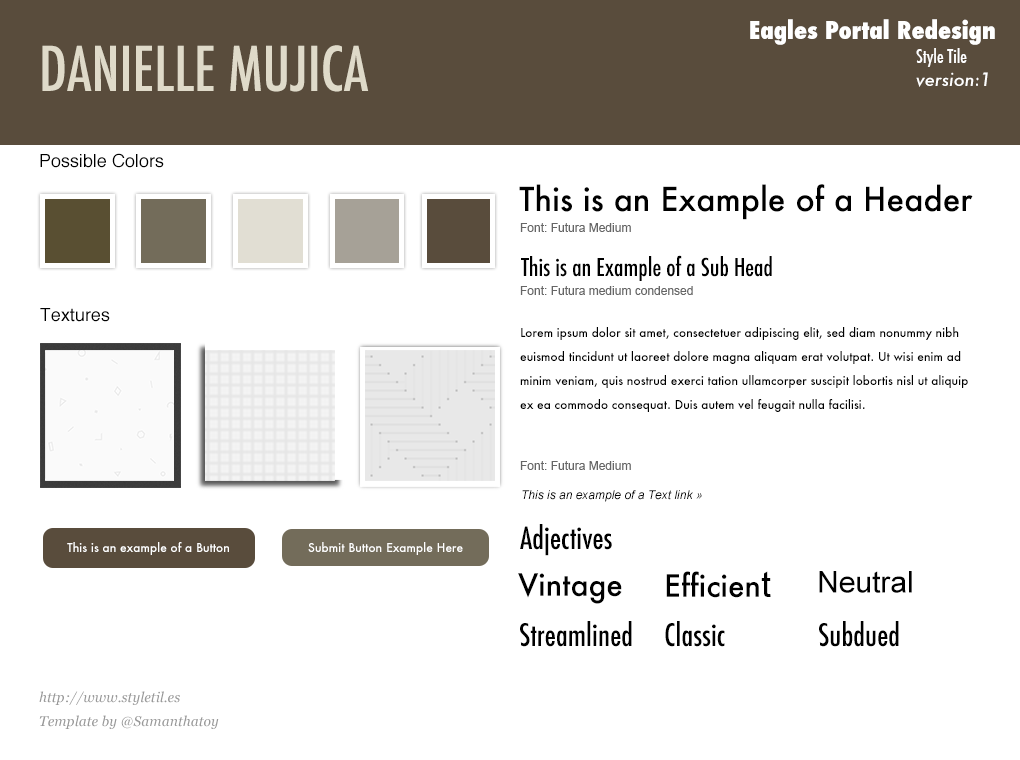
<style>
.page{position:relative;width:1020px;height:760px;background:#ffffff}
.page>*{position:absolute;margin:0}
.t1{font:24px "Futura-CondensedExtraBold";color:#ffffff}
.t2{font:60px "Futura-CondensedMedium";color:#dfdac9}
.t3{font:18px "Futura-CondensedMedium";color:#ffffff}
.t4{font:18px "Futura-MediumItalic";color:#ffffff}
.t5{font:18px "Helvetica";color:#000000}
.t6{font:32px "Futura-Medium";color:#000000}
.t7{font:12px "ArialMT";color:#666666}
.t8{font:24px "Futura-CondensedMedium";color:#000000}
.t9{font:12px/24px "Futura-Medium";color:#000000}
.t10{font:12px "Arial-ItalicMT";color:#000000}
.t11{font:30px "Futura-CondensedMedium";color:#000000}
.t12{font:12px "Futura-Medium";color:#ffffff}
.t13{font:30px "Futura-Medium";color:#000000}
.t14{font:36px "ArialMT";color:#000000}
.t15{font:30px "ArialMT";color:#000000}
.t16{font:14px/24px "Georgia-Italic";color:#999999}
</style>
<div class="page">
<p class="t1" style="left:750px;top:19px;width:245px;height:26px">Eagles Portal Redesign</p>
<p class="t2" style="left:42px;top:45px;width:327px;height:47px">DANIELLE MUJICA</p>
<p class="t3" style="left:916px;top:48px;width:51px;height:19px">Style Tile</p>
<p class="t4" style="left:916px;top:72px;width:72px;height:15px">version:1</p>
<p class="t5" style="left:40px;top:153px;width:124px;height:15px">Possible Colors</p>
<p class="t6" style="left:519px;top:184px;width:454px;height:36px">This is an Example of a Header</p>
<p class="t7" style="left:520px;top:223px;width:111px;height:9px">Font: Futura Medium</p>
<p class="t8" style="left:521px;top:255px;width:251px;height:26px">This is an Example of a Sub Head</p>
<p class="t7" style="left:520px;top:286px;width:173px;height:9px">Font: Futura medium condensed</p>
<p class="t5" style="left:40px;top:308px;width:70px;height:14px">Textures</p>
<p class="t9" style="left:520px;top:327px;width:448px;height:85px">Lorem ipsum dolor sit amet, consectetuer adipiscing elit, sed diam nonummy nibh euismod tincidunt ut laoreet dolore magna aliquam erat volutpat. Ut wisi enim ad minim veniam, quis nostrud exerci tation ullamcorper suscipit lobortis nisl ut aliquip ex ea commodo consequat. Duis autem vel feugait nulla facilisi.</p>
<p class="t7" style="left:520px;top:461px;width:111px;height:9px">Font: Futura Medium</p>
<p class="t10" style="left:522px;top:490px;width:180px;height:12px">This is an example of a Text link »</p>
<p class="t11" style="left:520px;top:524px;width:92px;height:32px">Adjectives</p>
<p class="t12" style="left:67px;top:542px;width:162px;height:13px">This is an example of a Button</p>
<p class="t12" style="left:308px;top:542px;width:155px;height:13px">Submit Button Example Here</p>
<p class="t13" style="left:518px;top:573px;width:104px;height:31px">Vintage</p>
<p class="t13" style="left:666px;top:571px;width:105px;height:27px">Efficien<span class="t14">t</span></p>
<p class="t15" style="left:819px;top:571px;width:93px;height:22px">Neutral</p>
<p class="t11" style="left:520px;top:621px;width:112px;height:26px">Streamlined</p>
<p class="t11" style="left:665px;top:621px;width:60px;height:26px">Classic</p>
<p class="t11" style="left:819px;top:621px;width:80px;height:26px">Subdued</p>
<p class="t16" style="left:39px;top:691px;width:180px;height:38px">http://www.styletil.es<br>Template by @Samanthatoy</p>
</div>
